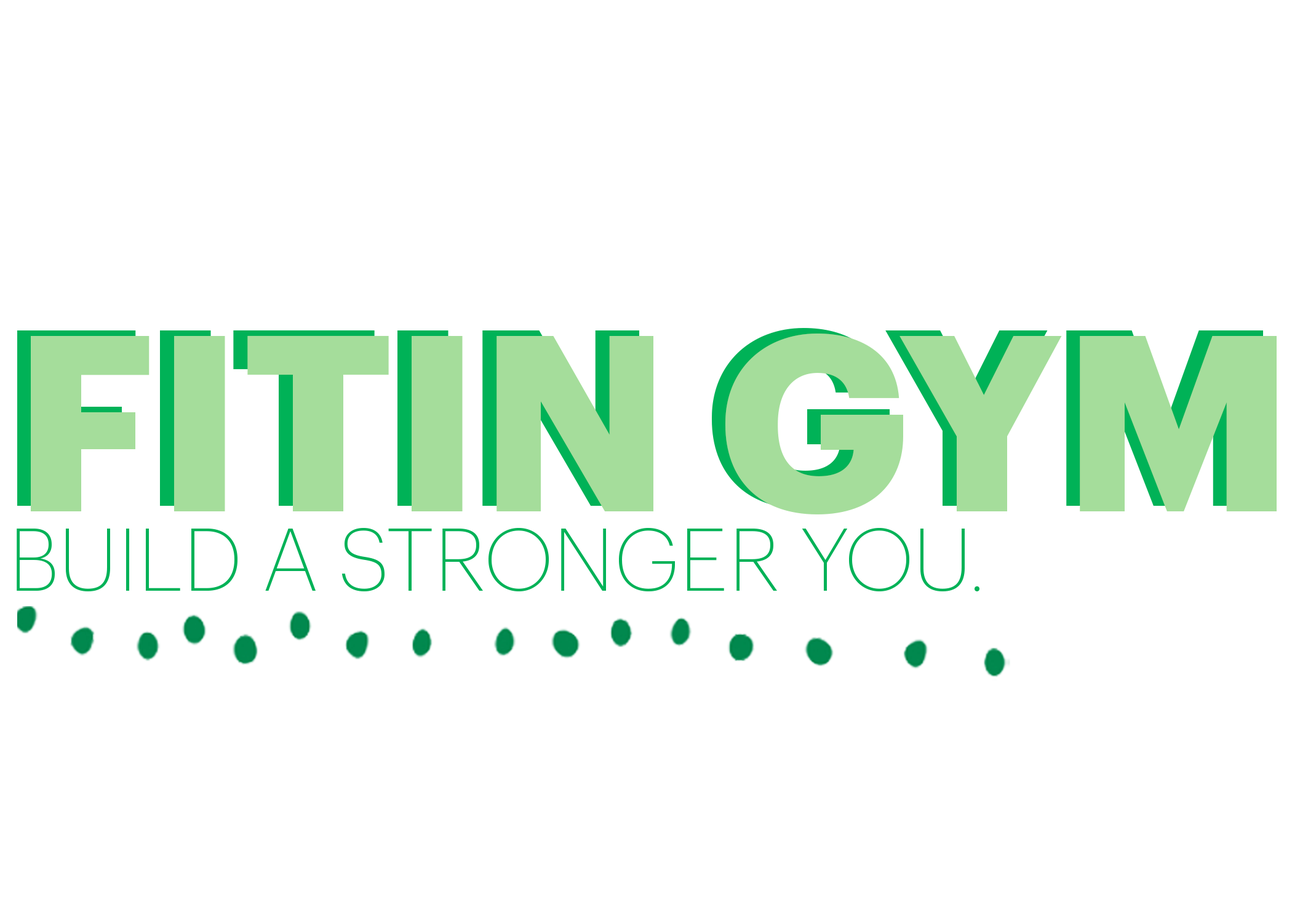
<style>
.page{position:relative;width:1292px;height:923px;background:#ffffff}
.page>*{position:absolute;margin:0}
.t1{font:244.9px "Graphik-Bold";color:#a5dd9b}
.t2{font:86.6px "Graphik-Extralight";color:#00b257}
</style>
<div class="page">
<p class="t1" style="left:17px;top:328px;width:1246px;height:181px">FITIN GYM</p>
<p class="t1" style="left:31px;top:333px;width:1246px;height:181px">FITIN GYM</p>
<p class="t2" style="left:17px;top:528px;width:963px;height:64px">BUILD A STRONGER YOU.</p>
</div>
